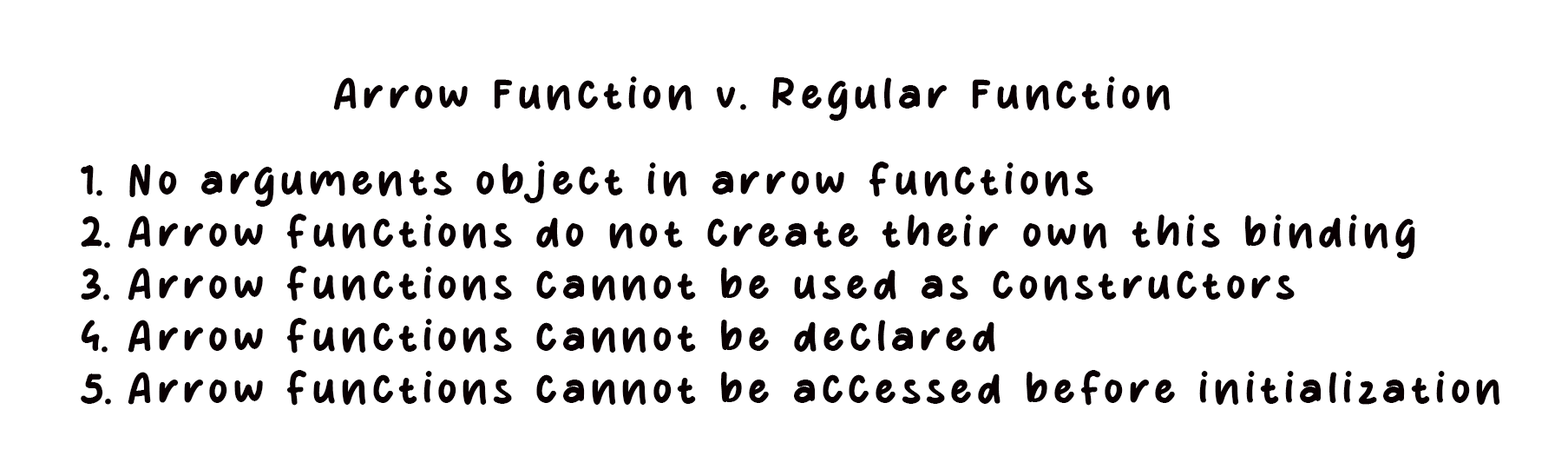
<style>
.page{position:relative;width:1568px;height:469px;background:#ffffff}
.page>*{position:absolute;margin:0}
.t1{font:43.4px "Starla";letter-spacing:0.12em;color:#090002}
</style>
<div class="page">
<p class="t1" style="left:333px;top:76px;width:838px;height:45px">Arrow Function v. Regular Function</p>
<p class="t1" style="left:81px;top:161px;width:1419px;height:244px">No arguments object in arrow functions<br>Arrow functions do not create their own this binding<br>Arrow functions cannot be used as constructors<br>Arrow functions cannot be declared<br>Arrow functions cannot be accessed before initialization</p>
</div>
